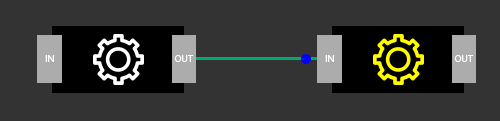
<style>
.page{position:relative;width:500px;height:121px;background:#333333}
.page>*{position:absolute;margin:0}
.t1{font:10px "MyriadPro-Regular";color:#ffffff}
</style>
<div class="page">
<p class="t1" style="left:45px;top:55px;width:9px;height:7px">IN</p>
<p class="t1" style="left:174px;top:55px;width:19px;height:7px">OUT</p>
<p class="t1" style="left:325px;top:55px;width:9px;height:7px">IN</p>
<p class="t1" style="left:454px;top:55px;width:19px;height:7px">OUT</p>
</div>
